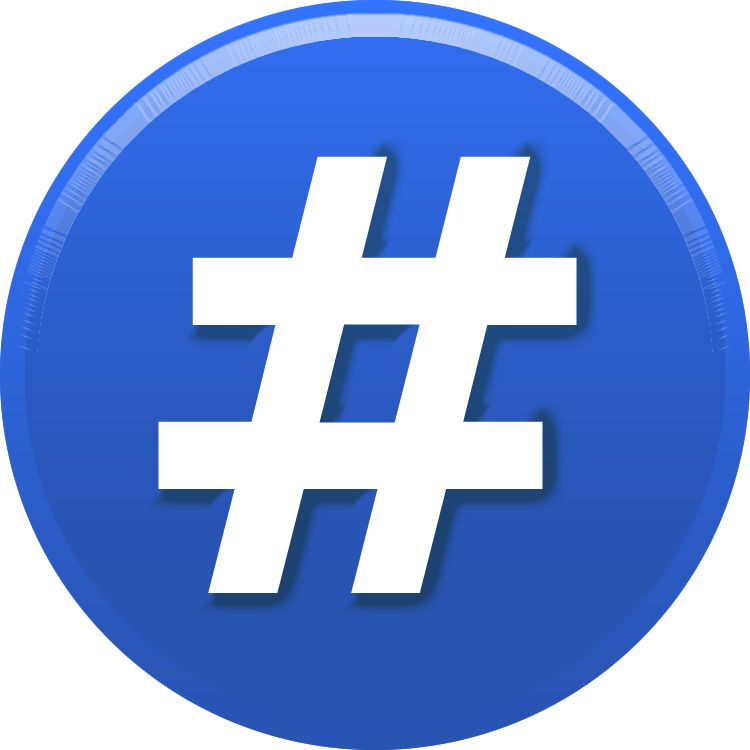
<style>
.page{position:relative;width:750px;height:750px;background:#ffffff}
.page>*{position:absolute;margin:0}
.t1{font:600px "Tahoma-Bold";color:#ffffff}
</style>
<div class="page">
<p class="t1" style="left:158px;top:156px;width:419px;height:437px">#</p>
</div>
